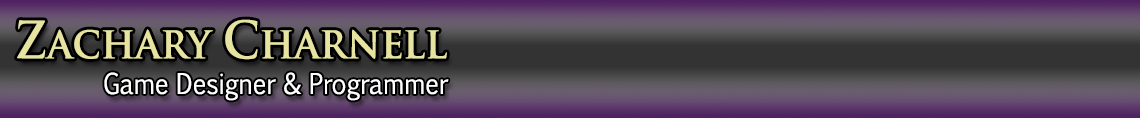
<style>
.page{position:relative;width:1140px;height:118px}
.page>*{position:absolute;margin:0}
.t1{font:43.6px "TrajanPro-Bold";color:#e7e3a0;scale:0.92 1}
.t2{font:50.1px "TrajanPro-Bold";color:#e7e3a0;scale:0.92 1}
.t3{font:27.3px "EuphemiaCAS";color:#ffffff;scale:0.92 1}
</style>
<div class="page">
<p class="t1" style="left:17px;top:19px;width:430px;height:41px"><span class="t2">Z</span>achary <span class="t2">C</span>harnell</p>
<p class="t3" style="left:104px;top:72px;width:345px;height:29px">Game Designer &amp; Programmer</p>
</div>
